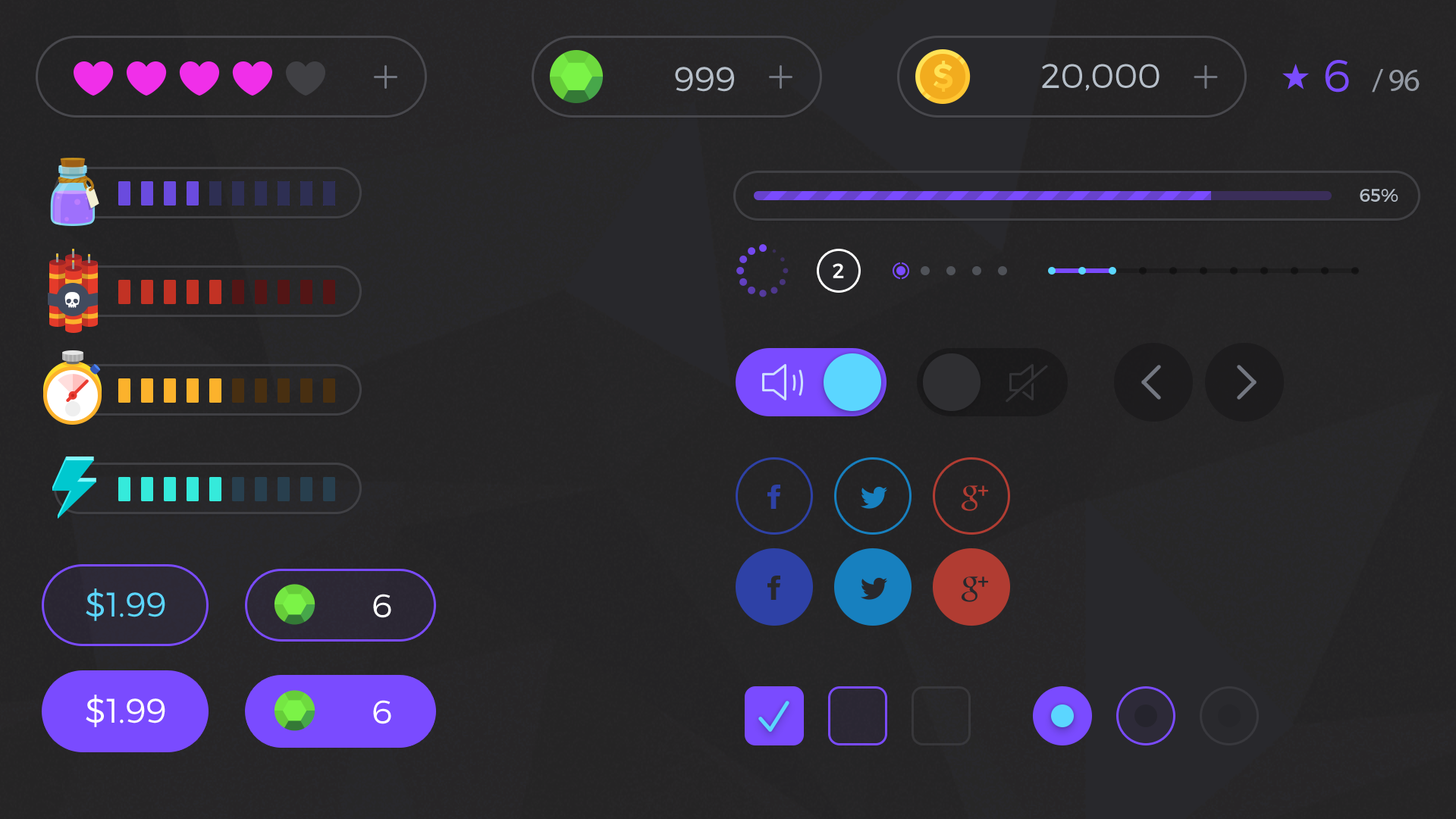
<style>
.page{position:relative;width:1456px;height:819px}
.page>*{position:absolute;margin:0}
.t1{font:34.1px "Montserrat-Light";color:#b6bfc9;text-transform:uppercase}
.t2{font:45.2px "Montserrat-Light";letter-spacing:-0.025em;color:#7a4bff;text-transform:uppercase}
.t3{font:31.6px "MyriadPro-Regular";letter-spacing:-0.025em;color:#9399a3;text-transform:uppercase}
.t4{font:18.2px "Montserrat-Regular";color:#b6bfc9;text-transform:uppercase}
.t5{font:20.5px "Montserrat-Regular";letter-spacing:0.04em;color:#ffffff}
.t6{font:34.1px "Montserrat-Light";color:#5bd6ff}
.t7{font:32.4px "Montserrat-Light";letter-spacing:-0.025em;color:#ffffff;text-transform:uppercase;scale:1.05 1}
.t8{font:34.1px "Montserrat-Light";color:#ffffff}
</style>
<div class="page">
<p class="t1" style="left:1042px;top:64px;width:117px;height:27px">20,000</p>
<p class="t2" style="left:1325px;top:60px;width:24px;height:33px">6</p>
<p class="t1" style="left:675px;top:67px;width:59px;height:25px">999</p>
<p class="t3" style="left:1372px;top:69px;width:48px;height:24px">/ 96</p>
<p class="t4" style="left:1360px;top:189px;width:38px;height:13px">65%</p>
<p class="t5" style="left:833px;top:263px;width:11px;height:15px">2</p>
<p class="t6" style="left:86px;top:588px;width:79px;height:33px">$1.99</p>
<p class="t7" style="left:373px;top:594px;width:18px;height:24px">6</p>
<p class="t8" style="left:86px;top:695px;width:79px;height:32px">$1.99</p>
<p class="t7" style="left:373px;top:700px;width:18px;height:24px">6</p>
</div>
